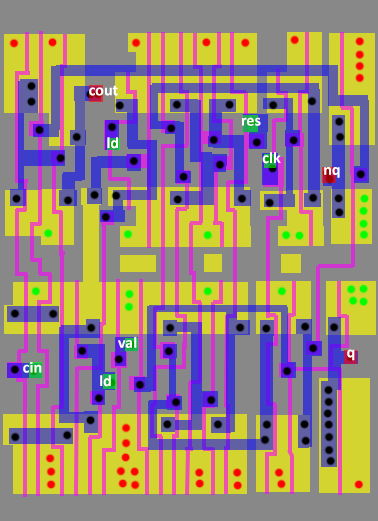
<style>
.page{position:relative;width:378px;height:521px;background:#888888}
.page>*{position:absolute;margin:0}
.t1{font:12px "Calibri-Bold";color:#ffffff}
</style>
<div class="page">
<p class="t1" style="left:89px;top:85px;width:29px;height:11px">cout</p>
<p class="t1" style="left:242px;top:117px;width:19px;height:9px">res</p>
<p class="t1" style="left:107px;top:137px;width:11px;height:12px">ld</p>
<p class="t1" style="left:262px;top:152px;width:19px;height:12px">clk</p>
<p class="t1" style="left:324px;top:167px;width:16px;height:11px">nq</p>
<p class="t1" style="left:118px;top:337px;width:19px;height:11px">val</p>
<p class="t1" style="left:347px;top:349px;width:8px;height:12px">q</p>
<p class="t1" style="left:23px;top:362px;width:19px;height:11px">cin</p>
<p class="t1" style="left:100px;top:375px;width:11px;height:12px">ld</p>
</div>
